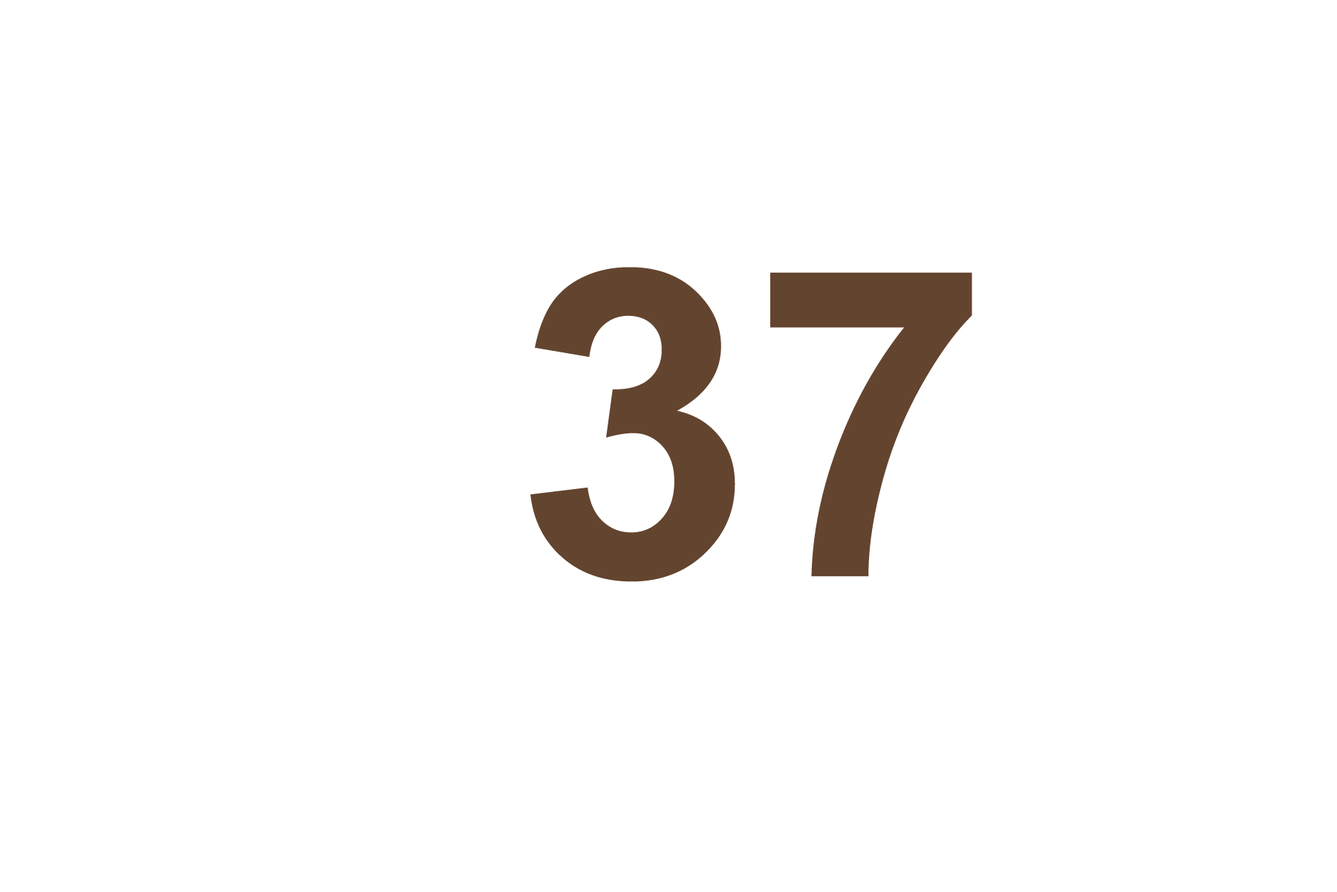
<style>
.page{position:relative;width:1337px;height:892px;background:#ffffff}
.page>*{position:absolute;margin:0}
.t1{font:429.6px "Arial-BoldMT";color:#63442f}
</style>
<div class="page">
<p class="t1" style="left:531px;top:267px;width:442px;height:315px">37</p>
</div>
